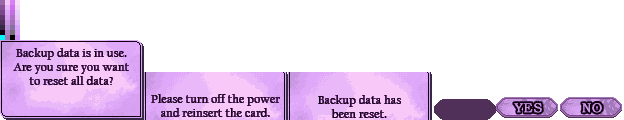
<style>
.page{position:relative;width:624px;height:120px;background:#ffffff}
.page>*{position:absolute;margin:0}
.t1{font:12px/14px "CalifornianFB-Reg";letter-spacing:0.025em;color:#100010}
</style>
<div class="page">
<p class="t1" style="left:13px;top:48px;width:116px;height:37px;text-align:center">Backup data is in use.<br>Are you sure you want<br>to reset all data?</p>
<p class="t1" style="left:151px;top:94px;width:129px;height:23px;text-align:center">Please turn off the power<br>and reinsert the card.</p>
<p class="t1" style="left:318px;top:95px;width:83px;height:23px;text-align:center">Backup data has<br>been reset.</p>
</div>
